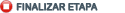
<style>
.page{position:relative;width:125px;height:13px;background:#ffffff}
.page>*{position:absolute;margin:0}
.t1{font:8.7px "ArialRoundedMTBold";color:#465864;font-weight:bold}
</style>
<div class="page">
<p class="t1" style="left:16px;top:3px;width:82px;height:8px">FINALIZAR ETAPA</p>
</div>
